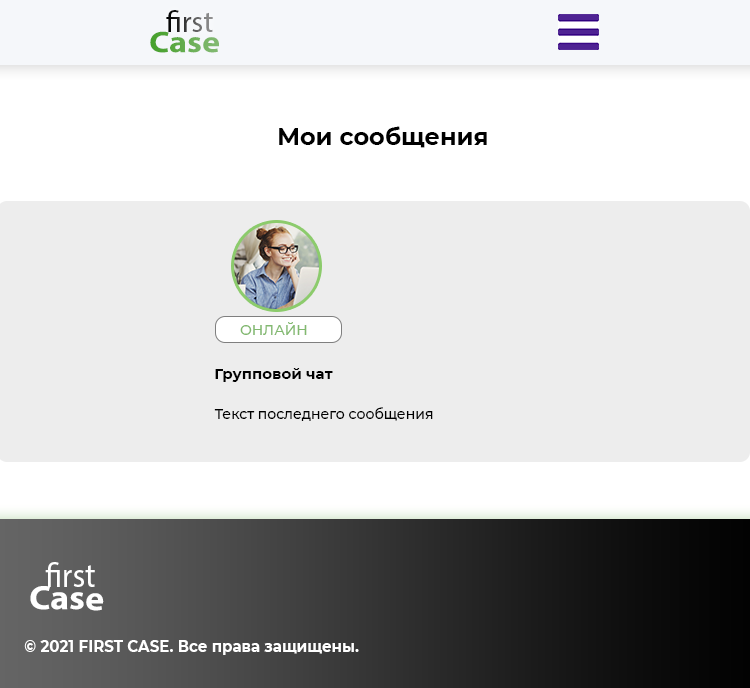
<style>
.page{position:relative;width:750px;height:688px;background:#ededed}
.page>*{position:absolute;margin:0}
.t1{font:30px "MyriadPro-Regular"}
.t2{font:30px "MyriadPro-Bold";scale:1.13 1}
.t3{font:30px "MyriadPro-Regular";scale:1.13 1}
.t4{font:24px "Montserrat-Bold";color:#000000}
.t5{font:14px "Montserrat-Medium";color:#82b970}
.t6{font:15px "Montserrat-Bold";color:#000000}
.t7{font:14px "Montserrat-Medium";color:#000000}
.t8{font:34px "MyriadPro-Regular";color:#ffffff;scale:0.94 1}
.t9{font:34px "MyriadPro-Bold";color:#ffffff;scale:1.06 1}
.t10{font:34px "MyriadPro-Regular";color:#ffffff;scale:1.06 1}
.t11{font:16px "Montserrat-Bold";color:#ffffff;scale:0.94 1}
</style>
<div class="page">
<p class="t1" style="left:166px;top:10px;width:47px;height:22px">first</p>
<p class="t2" style="left:150px;top:31px;width:69px;height:22px;rotate:1deg"><span class="t3">       </span>Case</p>
<p class="t4" style="left:279px;top:126px;width:208px;height:22px">Мои сообщения</p>
<p class="t5" style="left:240px;top:322px;width:67px;height:13px">ОНЛАЙН</p>
<p class="t6" style="left:215px;top:368px;width:118px;height:14px">Групповой чат</p>
<p class="t7" style="left:214px;top:407px;width:219px;height:14px">Текст последнего сообщения</p>
<p class="t8" style="left:45px;top:562px;width:50px;height:25px">first</p>
<p class="t9" style="left:30px;top:586px;width:74px;height:25px;rotate:1deg"><span class="t10">       </span>Case</p>
<p class="t11" style="left:24px;top:640px;width:335px;height:15px">© 2021 FIRST CASE. Все права защищены.</p>
</div>
